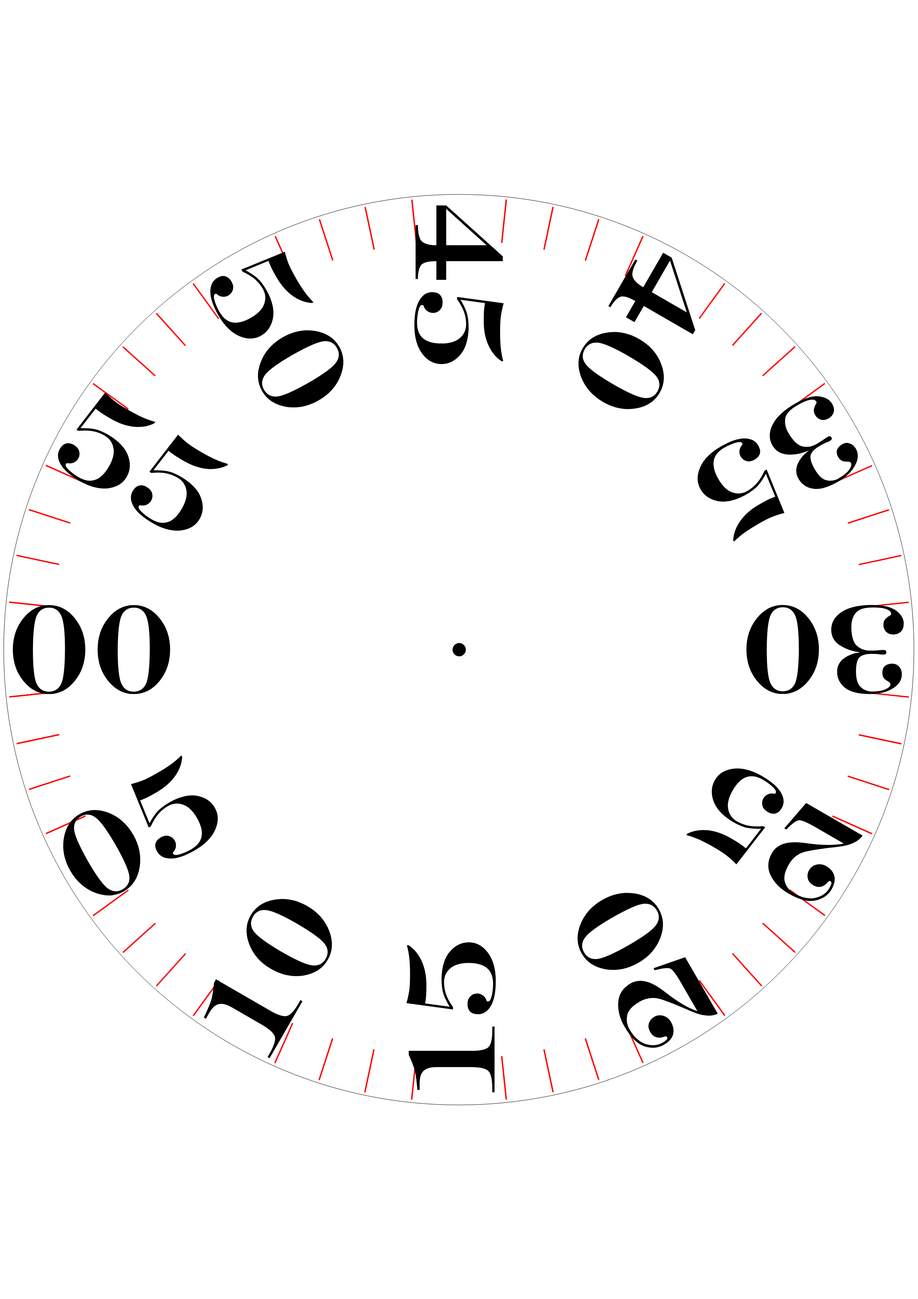
<style>
.page{position:relative;width:918px;height:1299px;background:#ffffff}
.page>*{position:absolute;margin:0}
.t1{font:125.9px "Engry";color:#000000}
</style>
<div class="page">
<p class="t1" style="left:414px;top:205px;width:90px;height:159px;rotate:90deg">45</p>
<p class="t1" style="left:210px;top:252px;width:134px;height:156px;rotate:60deg">50</p>
<p class="t1" style="left:578px;top:252px;width:118px;height:157px;rotate:120deg">40</p>
<p class="t1" style="left:58px;top:392px;width:170px;height:139px;rotate:30deg">55</p>
<p class="t1" style="left:697px;top:396px;width:161px;height:146px;rotate:150deg">35</p>
<p class="t1" style="left:13px;top:605px;width:157px;height:89px">00</p>
<p class="t1" style="left:746px;top:605px;width:158px;height:89px;rotate:180deg">30</p>
<p class="t1" style="left:63px;top:755px;width:155px;height:141px;rotate:-30deg">05</p>
<p class="t1" style="left:686px;top:768px;width:177px;height:133px;rotate:-150deg">25</p>
<p class="t1" style="left:578px;top:893px;width:140px;height:155px;rotate:-120deg">20</p>
<p class="t1" style="left:204px;top:899px;width:128px;height:159px;rotate:-60deg">10</p>
<p class="t1" style="left:407px;top:942px;width:89px;height:150px;rotate:-90deg">15</p>
</div>
